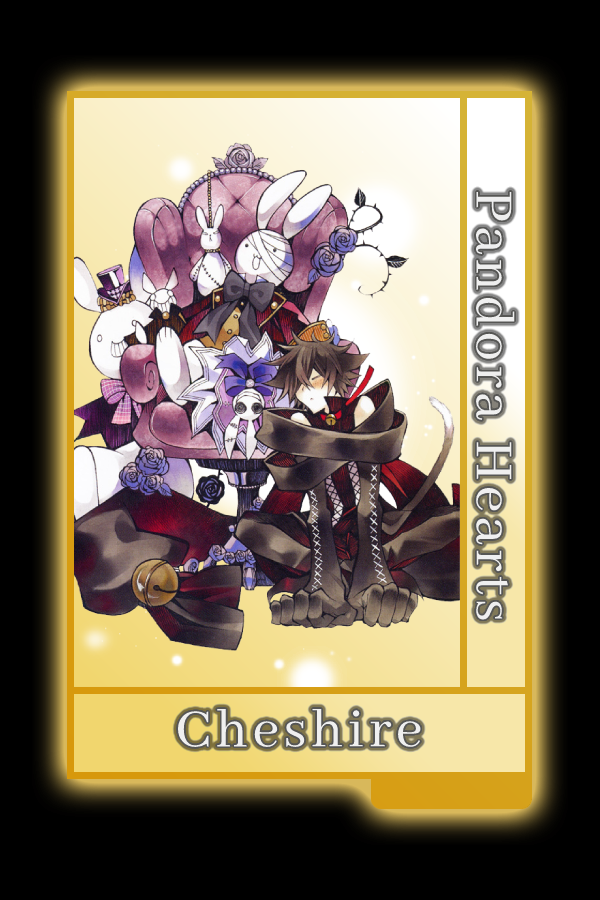
<style>
.page{position:relative;width:600px;height:900px;background:#000000}
.page>*{position:absolute;margin:0}
.t1{font:59.1px "AbhayaLibre-Regular";letter-spacing:0.072em;color:#efefef}
.t2{font:59px "AbhayaLibre-Regular";letter-spacing:0.072em;color:#efefef}
</style>
<div class="page">
<p class="t1" style="left:476px;top:192px;width:39px;height:428px;rotate:90deg">Pandora Hearts</p>
<p class="t2" style="left:178px;top:708px;width:243px;height:39px">Cheshire</p>
</div>
